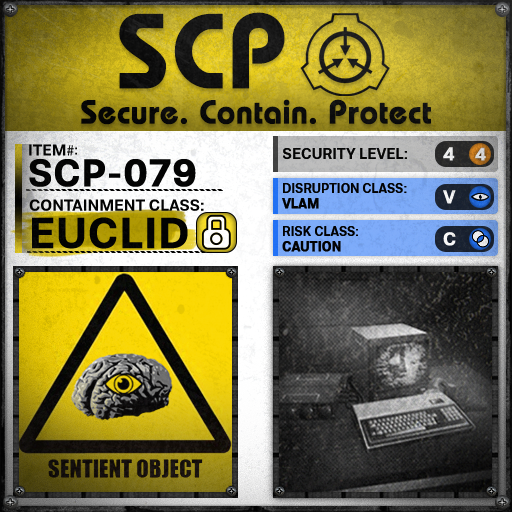
<style>
.page{position:relative;width:512px;height:512px}
.page>*{position:absolute;margin:0}
.t1{font:105.8px "BauhausLT-Demi";color:#000000;font-weight:bold}
.t2{font:33px "BauhausLT-Demi";color:#000000;font-weight:bold}
.t3{font:15.7px "Molde-Semibold";color:#000000}
.t4{font:15.7px "MyriadPro-Regular";color:#000000}
.t5{font:13.7px "Molde-Semibold";color:#000000}
.t6{font:15px "Molde-Semibold";color:#000000}
.t7{font:18.6px "Molde-Semibold";color:#ffffff;font-weight:bold}
.t8{font:17.8px "Molde-Semibold";color:#d5d6d6;font-weight:bold}
.t9{font:38.2px "Molde-Semibold";color:#000000;font-weight:bold}
.t10{font:12.8px "Molde-Semibold";color:#000000}
.t11{font:12.8px "Molde-Semibold";color:#000000;font-weight:bold}
.t12{font:15.9px "Molde-Semibold";color:#000000}
.t13{font:42.8px "Molde-Semibold";color:#000000;font-weight:bold}
</style>
<div class="page">
<p class="t1" style="left:119px;top:12px;width:166px;height:77px">SCP</p>
<p class="t2" style="left:81px;top:99px;width:350px;height:26px">Secure. Contain. Protect</p>
<p class="t3" style="left:29px;top:144px;width:45px;height:12px">ITEM<span class="t4">#</span></p>
<p class="t5" style="left:75px;top:147px;width:2px;height:8px">:</p>
<p class="t6" style="left:283px;top:148px;width:124px;height:11px">SECURITY LEVEL:</p>
<p class="t7" style="left:443px;top:147px;width:12px;height:14px">4</p>
<p class="t8" style="left:475px;top:147px;width:11px;height:14px">4</p>
<p class="t9" style="left:29px;top:159px;width:167px;height:28px">SCP-079</p>
<p class="t10" style="left:282px;top:183px;width:125px;height:26px">DISRUPTION CLASS:<br><span class="t11">VLAM</span></p>
<p class="t7" style="left:443px;top:190px;width:13px;height:14px">V</p>
<p class="t12" style="left:29px;top:199px;width:175px;height:12px">CONTAINMENT CLASS:</p>
<p class="t13" style="left:32px;top:217px;width:156px;height:32px">EUCLID</p>
<p class="t10" style="left:282px;top:226px;width:76px;height:26px">RISK CLASS:<br><span class="t11">CAUTION</span></p>
<p class="t7" style="left:443px;top:232px;width:13px;height:14px">C</p>
</div>
